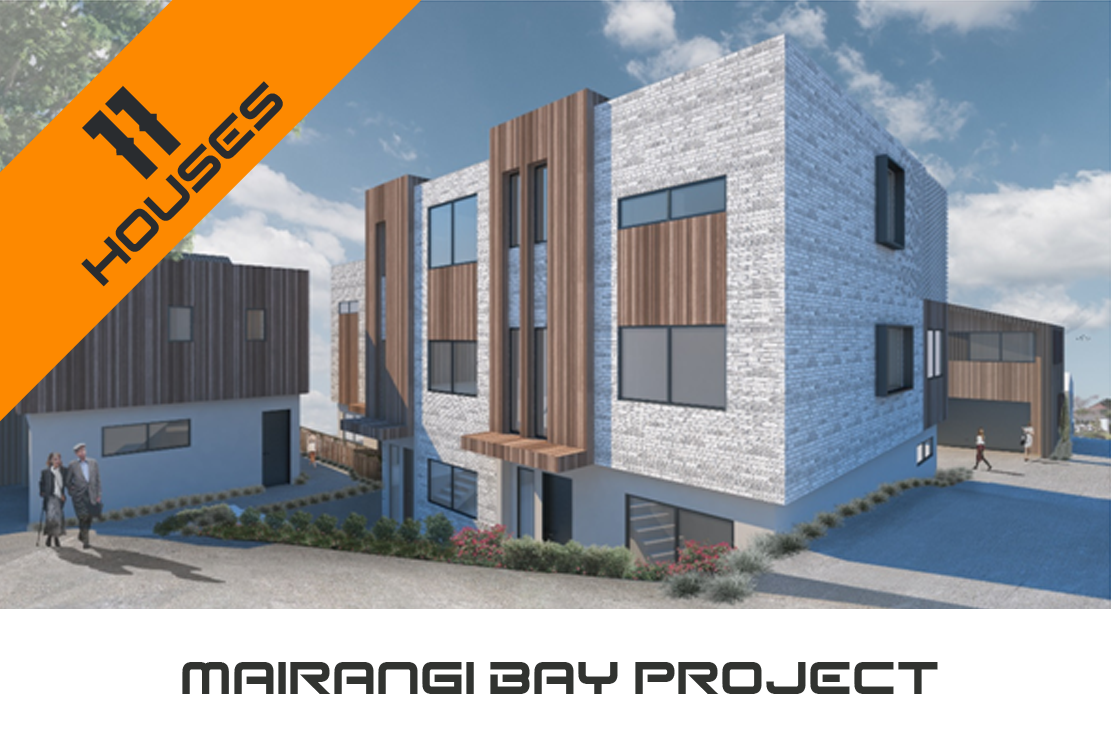
<style>
.page{position:relative;width:1111px;height:741px}
.page>*{position:absolute;margin:0}
.t1{font:50px/66px "SeldomScene";color:#292c2f;text-transform:uppercase}
.t2{font:72px/66px "AldivaroDemo";color:#292c2f;text-transform:uppercase}
.t3{font:50px "SeldomScene";color:#313330;text-transform:uppercase}
</style>
<div class="page">
<p class="t1" style="left:81px;top:81px;width:202px;height:206px;text-align:center;rotate:-45deg"><span class="t2">11<br></span>Houses</p>
<p class="t3" style="left:182px;top:662px;width:756px;height:32px">mairangi bay project</p>
</div>
